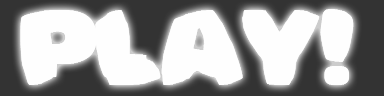
<style>
.page{position:relative;width:384px;height:96px;background:#fefefe}
.page>*{position:absolute;margin:0}
.t1{font:100px "Bomberman";color:#fefefe}
</style>
<div class="page">
<p class="t1" style="left:20px;top:9px;width:334px;height:76px">Play!</p>
<p class="t1" style="left:20px;top:9px;width:334px;height:76px">Play!</p>
</div>
